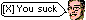
<style>
.page{position:relative;width:86px;height:20px;background:#ffffff}
.page>*{position:absolute;margin:0}
.t1{font:9px "Small Fonts";color:#000000}
</style>
<div class="page">
<p class="t1" style="left:3px;top:5px;width:54px;height:9px">[X] You  suck</p>
</div>
